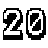
<style>
.page{position:relative;width:48px;height:48px;background:#ffffff}
.page>*{position:absolute;margin:0}
.t1{font:36px "KarmaFuture-Regular";color:#010101}
</style>
<div class="page">
<p class="t1" style="left:3px;top:8px;width:43px;height:32px">20</p>
</div>
